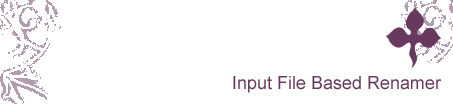
<style>
.page{position:relative;width:453px;height:106px;background:#ffffff}
.page>*{position:absolute;margin:0}
.t1{font:18px "ArialMT";color:#68395f}
</style>
<div class="page">
<p class="t1" style="left:233px;top:76px;width:209px;height:17px">Input File Based Renamer</p>
</div>
